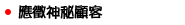
<style>
.page{position:relative;width:185px;height:25px;background:#ffffff}
.page>*{position:absolute;margin:0}
.t1{font:14px "DFPOP1-W5-HK-BF";letter-spacing:-0.025em;color:#000000;font-weight:bold}
</style>
<div class="page">
<p class="t1" style="left:18px;top:5px;width:85px;height:14px">應徵神秘顧客</p>
</div>
